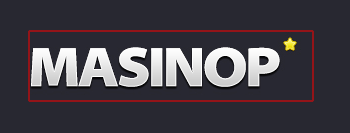
<style>
.page{position:relative;width:350px;height:133px;background:#282831}
.page>*{position:absolute;margin:0}
.t1{font:56px "MyriadPro-BlackSemiExt";letter-spacing:-0.05em;color:#e9e9e9}
</style>
<div class="page">
<p class="t1" style="left:31px;top:47px;width:249px;height:40px">MASINOP</p>
</div>
